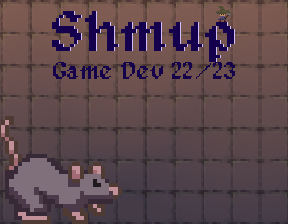
<style>
.page{position:relative;width:288px;height:224px}
.page>*{position:absolute;margin:0}
.t1{font:58.3px "Alagard";color:#14004c}
.t2{font:25px "Alagard";color:#15014b}
</style>
<div class="page">
<p class="t1" style="left:52px;top:11px;width:182px;height:51px">Shmup</p>
<p class="t1" style="left:53px;top:11px;width:182px;height:51px">Shmup</p>
<p class="t2" style="left:53px;top:62px;width:182px;height:17px">Game Dev 22/23</p>
</div>
